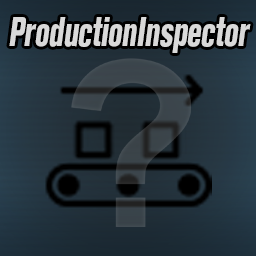
<style>
.page{position:relative;width:256px;height:256px}
.page>*{position:absolute;margin:0}
.t1{font:39.6px "AkzidenzGroteskBQ-XBdCnd";letter-spacing:-0.005em;color:#d9d9d9;font-style:italic;scale:0.75 1}
</style>
<div class="page">
<p class="t1" style="left:9px;top:17px;width:242px;height:36px">ProductionInspector</p>
</div>
